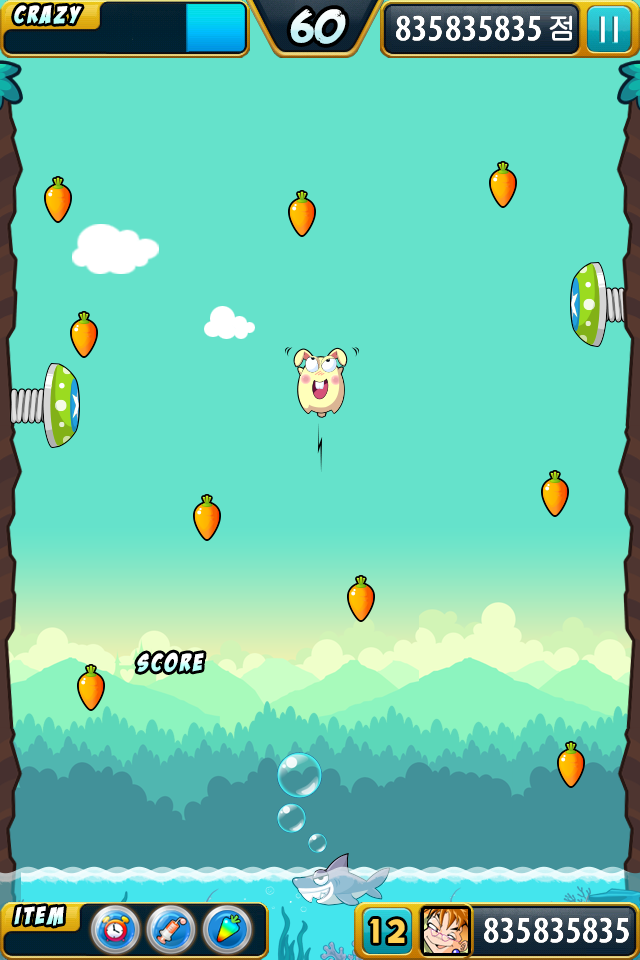
<style>
.page{position:relative;width:640px;height:960px;background:#65e2cb}
.page>*{position:absolute;margin:0}
.t1{font:24px "BadaBoomBB";letter-spacing:0.15em}
.t2{font:48px "FeastofFleshBB";letter-spacing:0.1em}
.t3{font:30px "Gulim";letter-spacing:0.1em;color:#ffffff;font-weight:bold}
.t4{font:40px "BattleLines";letter-spacing:0.2em;color:#ffd154}
</style>
<div class="page">
<p class="t1" style="left:14px;top:5px;width:68px;height:19px">crazy</p>
<p class="t2" style="left:290px;top:9px;width:56px;height:35px">60</p>
<p class="t3" style="left:549px;top:15px;width:23px;height:26px">점</p>
<p class="t1" style="left:137px;top:652px;width:67px;height:20px">score</p>
<p class="t1" style="left:14px;top:906px;width:50px;height:20px">item</p>
<p class="t4" style="left:370px;top:919px;width:35px;height:24px">12</p>
</div>
